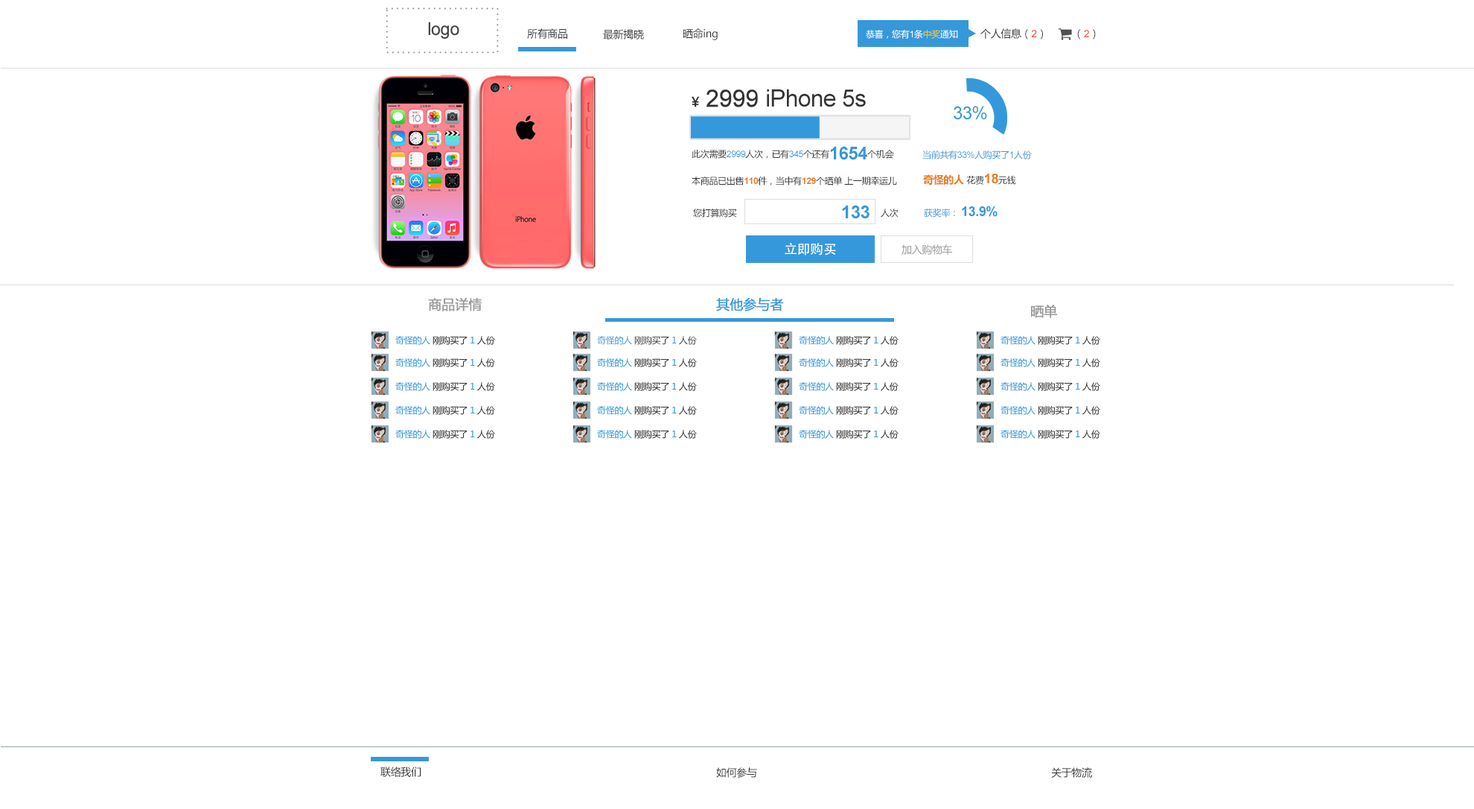
<style>
.page{position:relative;width:1474px;height:809px;background:#ffffff}
.page>*{position:absolute;margin:0}
.t1{font:10.4px "MicrosoftYaHei";letter-spacing:-0.025em;color:#333333}
.t2{font:8.9px "MicrosoftYaHei";letter-spacing:-0.025em;color:#ffffff}
.t3{font:8.9px "ArialMT";letter-spacing:-0.025em;color:#ffffff}
.t4{font:8.9px "MicrosoftYaHei";letter-spacing:-0.025em;color:#f1c619}
.t5{font:10.4px "ArialMT";letter-spacing:-0.025em;color:#e74c3c}
.t6{font:23.8px "ArialMT";letter-spacing:-0.025em;color:#333333;font-weight:bold}
.t7{font:13.4px "MicrosoftYaHei";letter-spacing:-0.025em;color:#333333;font-weight:bold}
.t8{font:23.8px "ArialMT";letter-spacing:-0.025em;color:#333333}
.t9{font:17.9px "ArialMT";letter-spacing:-0.025em;color:#3498db}
.t10{font:8.9px "MicrosoftYaHei";letter-spacing:-0.025em;color:#333333}
.t11{font:8.9px "ArialMT";letter-spacing:-0.025em;color:#3498db}
.t12{font:17.9px "Arial-BoldMT";letter-spacing:-0.025em;color:#3498db}
.t13{font:8.9px "MicrosoftYaHei";letter-spacing:-0.025em;color:#3498db}
.t14{font:10.4px "MicrosoftYaHei-Bold";letter-spacing:-0.025em;color:#e67e22}
.t15{font:13.4px "Arial-BoldMT";letter-spacing:-0.025em;color:#e67e22}
.t16{font:8.9px "Arial-BoldMT";letter-spacing:-0.025em;color:#e67e22}
.t17{font:13.4px "Arial-BoldMT";letter-spacing:-0.025em;color:#3498db}
.t18{font:13.4px "AdobeHeitiStd-Regular";letter-spacing:-0.025em;color:#ffffff}
.t19{font:10.4px "MicrosoftYaHei";letter-spacing:-0.025em;color:#999999}
.t20{font:13.4px "MicrosoftYaHei";letter-spacing:-0.025em;color:#999999;font-weight:bold}
.t21{font:13.4px "MicrosoftYaHei";letter-spacing:-0.025em;color:#3498db;font-weight:bold}
</style>
<div class="page">
<p class="t1" style="left:527px;top:28px;width:40px;height:11px">所有商品</p>
<p class="t1" style="left:603px;top:29px;width:41px;height:10px">最新揭晓</p>
<p class="t1" style="left:683px;top:28px;width:35px;height:12px">晒命ing</p>
<p class="t2" style="left:866px;top:30px;width:92px;height:9px">恭喜，您有<span class="t3">1</span>条<span class="t4">中奖</span>通知</p>
<p class="t1" style="left:981px;top:28px;width:62px;height:11px">个人信息（<span class="t5">2</span>）</p>
<p class="t1" style="left:1078px;top:29px;width:18px;height:10px">（<span class="t5">2</span>）</p>
<p class="t6" style="left:692px;top:89px;width:66px;height:18px"><span class="t7">￥ </span>2999</p>
<p class="t8" style="left:767px;top:89px;width:99px;height:18px">iPhone 5s</p>
<p class="t9" style="left:954px;top:106px;width:33px;height:14px">33%</p>
<p class="t10" style="left:692px;top:146px;width:202px;height:14px">此次需要<span class="t11">2999</span>人次，已有<span class="t11">345</span>个还有<span class="t12">1654</span>个机会</p>
<p class="t13" style="left:923px;top:150px;width:109px;height:9px">当前共有<span class="t11">33%</span>人购买了<span class="t11">1</span>人份</p>
<p class="t14" style="left:923px;top:174px;width:93px;height:11px">奇怪的人 <span class="t10">花费</span><span class="t15">18</span><span class="t10">元钱</span></p>
<p class="t10" style="left:692px;top:176px;width:205px;height:9px">本商品已出售<span class="t16">110</span>件，当中有<span class="t16">129</span>个晒单 上一期幸运儿</p>
<p class="t10" style="left:693px;top:209px;width:44px;height:8px">您打算购买</p>
<p class="t12" style="left:842px;top:205px;width:28px;height:14px">133</p>
<p class="t10" style="left:881px;top:209px;width:18px;height:8px">人次</p>
<p class="t17" style="left:924px;top:206px;width:74px;height:11px"><span class="t13">获奖率： </span>13.9%</p>
<p class="t18" style="left:785px;top:243px;width:51px;height:12px">立即购买</p>
<p class="t19" style="left:902px;top:244px;width:50px;height:11px">加入购物车</p>
<p class="t20" style="left:428px;top:297px;width:54px;height:14px">商品详情</p>
<p class="t21" style="left:716px;top:297px;width:68px;height:14px">其他参与者</p>
<p class="t20" style="left:1031px;top:305px;width:26px;height:13px">晒单</p>
<p class="t13" style="left:597px;top:336px;width:100px;height:9px">奇怪的人 <span class="t10">刚购买了 </span>1 <span class="t10">人份</span></p>
<p class="t1" style="left:381px;top:766px;width:40px;height:11px">联络我们</p>
<p class="t1" style="left:716px;top:767px;width:41px;height:10px">如何参与</p>
<p class="t1" style="left:1051px;top:767px;width:41px;height:10px">关于物流</p>
</div>
